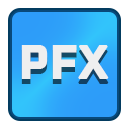
<style>
.page{position:relative;width:128px;height:128px;background:#ffffff}
.page>*{position:absolute;margin:0}
.t1{font:49.2px "Oxanium-ExtraBold";letter-spacing:-0.02em;color:#efefef}
</style>
<div class="page">
<p class="t1" style="left:21px;top:45px;width:88px;height:34px">PFX</p>
</div>
